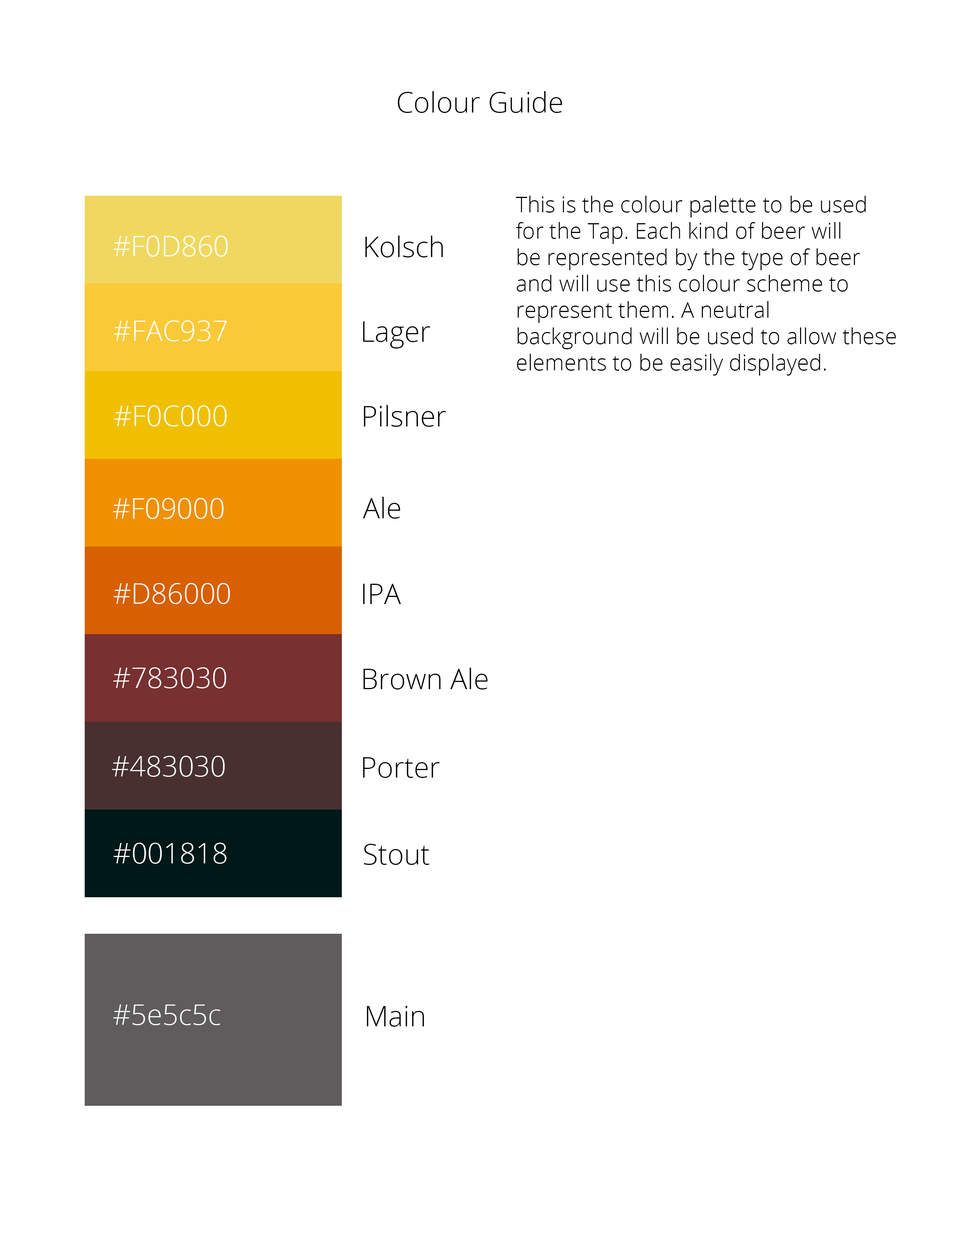
<style>
.page{position:relative;width:960px;height:1242px;background:#ffffff}
.page>*{position:absolute;margin:0}
.t1{font:28.2px "OpenSans-Light";color:#000000}
.t2{font:22px "OpenSans-Light";color:#000000}
.t3{font:28.2px "OpenSans-Light";color:#ffffff}
</style>
<div class="page">
<p class="t1" style="left:398px;top:91px;width:164px;height:22px">Colour Guide</p>
<p class="t2" style="left:516px;top:196px;width:380px;height:180px">This is the colour palette to be used<br>for the Tap. Each kind of beer will<br>be represented by the type of beer<br>and will use this colour scheme to <br>represent them. A neutral <br>background will be used to allow these<br>elements to be easily displayed.</p>
<p class="t3" style="left:113px;top:236px;width:115px;height:21px">#F0D860</p>
<p class="t1" style="left:365px;top:236px;width:78px;height:21px">Kolsch</p>
<p class="t3" style="left:114px;top:320px;width:113px;height:21px">#FAC937</p>
<p class="t1" style="left:363px;top:321px;width:67px;height:28px">Lager</p>
<p class="t3" style="left:114px;top:405px;width:113px;height:22px">#F0C000</p>
<p class="t1" style="left:364px;top:405px;width:82px;height:22px">Pilsner</p>
<p class="t1" style="left:363px;top:497px;width:37px;height:22px">Ale</p>
<p class="t3" style="left:113px;top:498px;width:111px;height:21px">#F09000</p>
<p class="t3" style="left:114px;top:583px;width:116px;height:21px">#D86000</p>
<p class="t1" style="left:363px;top:584px;width:38px;height:20px">IPA</p>
<p class="t3" style="left:113px;top:667px;width:113px;height:21px">#783030</p>
<p class="t1" style="left:363px;top:668px;width:124px;height:22px">Brown Ale</p>
<p class="t3" style="left:112px;top:756px;width:113px;height:21px">#483030</p>
<p class="t1" style="left:363px;top:757px;width:77px;height:21px">Porter</p>
<p class="t3" style="left:114px;top:843px;width:113px;height:21px">#001818</p>
<p class="t1" style="left:364px;top:844px;width:66px;height:21px">Stout</p>
<p class="t3" style="left:113px;top:1005px;width:107px;height:20px">#5e5c5c</p>
<p class="t1" style="left:367px;top:1006px;width:57px;height:21px">Main</p>
</div>
